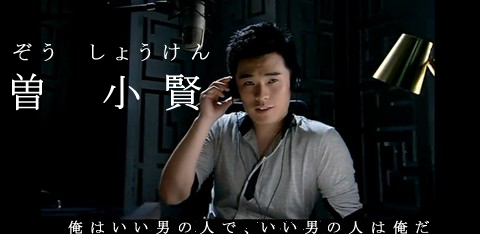
<style>
.page{position:relative;width:480px;height:234px;background:#000000}
.page>*{position:absolute;margin:0}
.t1{font:20px "MS-PMincho";letter-spacing:0.5em;color:#ffffff;font-weight:bold}
.t2{font:40px "MS-PMincho";letter-spacing:0.5em;color:#ffffff;font-weight:bold}
.t3{font:14.7px "MS-PMincho";letter-spacing:0.5em;color:#ffffff;font-weight:bold}
</style>
<div class="page">
<p class="t1" style="left:13px;top:43px;width:197px;height:18px">ぞう　しょうけん</p>
<p class="t2" style="left:12px;top:73px;width:190px;height:38px">曽 小賢</p>
<p class="t3" style="left:68px;top:220px;width:361px;height:15px">俺はいい男の人で、いい男の人は俺だ</p>
</div>
